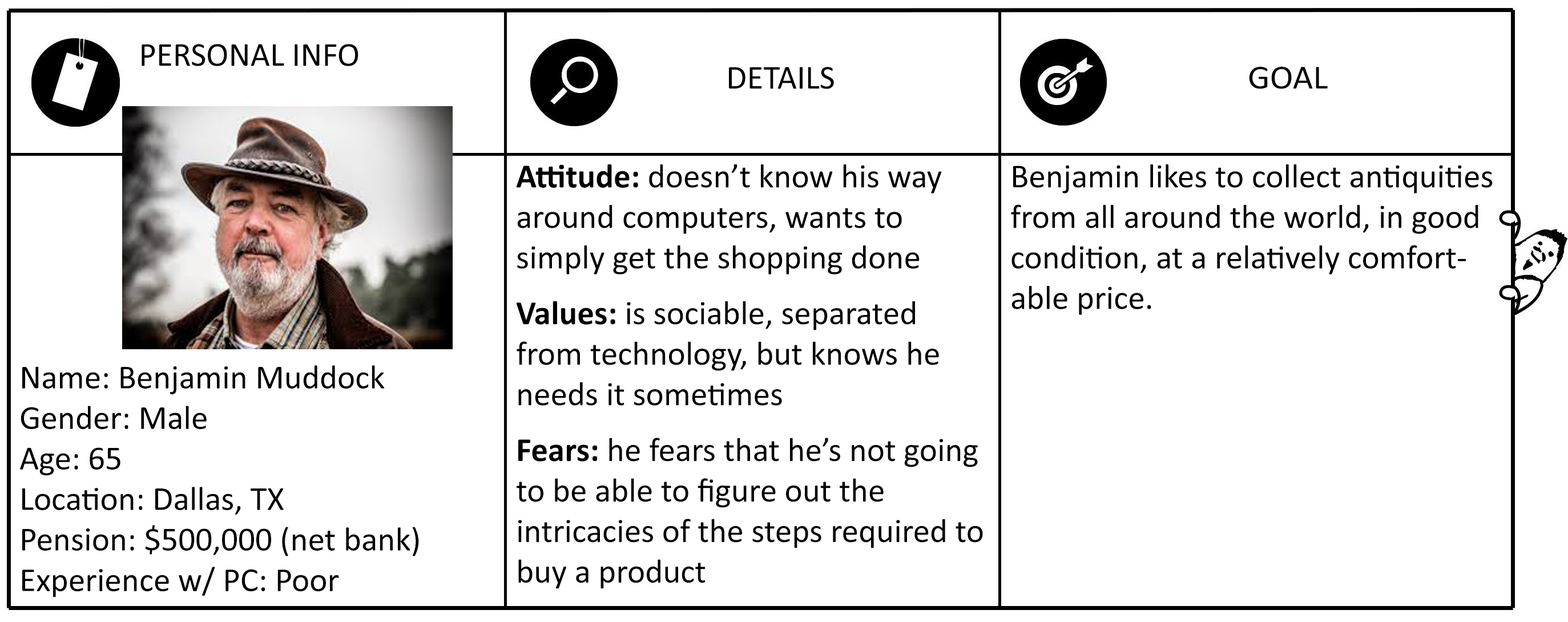
<style>
.page{position:relative;width:1568px;height:622px;background:#ffffff}
.page>*{position:absolute;margin:0}
.t1{font:33.8px "Calibri";color:#000000}
.t2{font:33.8px "Calibri";color:#000000;scale:1.04 1}
.t3{font:33.8px "Calibri-Bold";color:#000000}
</style>
<div class="page">
<p class="t1" style="left:142px;top:44px;width:216px;height:22px">PERSONAL INFO</p>
<p class="t1" style="left:729px;top:67px;width:105px;height:22px">DETAILS</p>
<p class="t2" style="left:1249px;top:67px;width:79px;height:22px">GOAL</p>
<p class="t1" style="left:516px;top:164px;width:467px;height:425px"><span class="t3">Attitude: </span>doesn’t know his way around computers, wants to simply get the shopping done<br><span class="t3">Values:</span> is sociable, separated from technology, but knows he needs it sometimes<br><span class="t3">Fears:</span> he fears that he’s not going to be able to figure out the          intricacies of the steps required to buy a product</p>
<p class="t1" style="left:1011px;top:164px;width:482px;height:151px">Benjamin likes to collect antiquities from all around the world, in good condition, at a relatively comfortable price.</p>
<p class="t1" style="left:20px;top:365px;width:399px;height:233px">Name: Benjamin Muddock<br>Gender: Male<br>Age: 65<br>Location: Dallas, TX <br>Pension: $500,000 (net bank)<br>Experience w/ PC: Poor</p>
</div>
